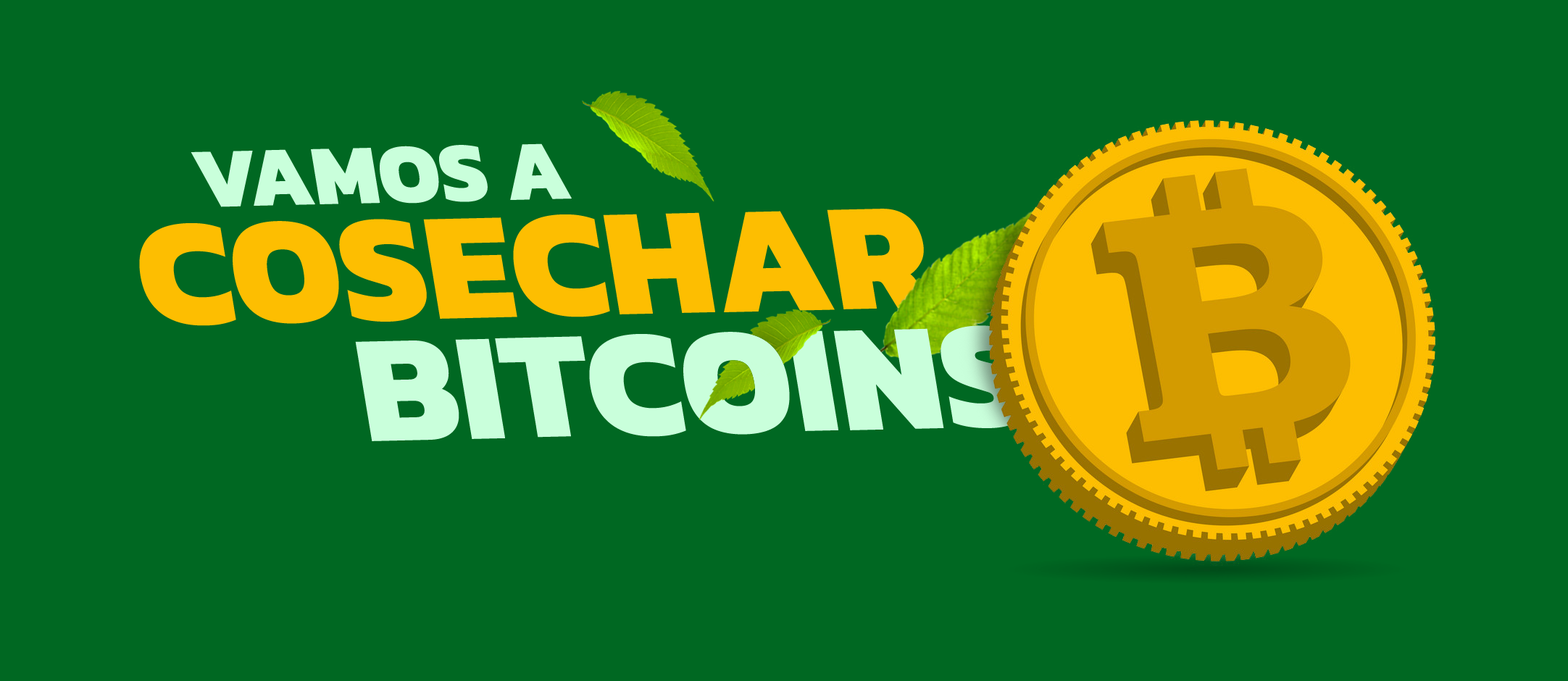
<style>
.page{position:relative;width:1568px;height:681px;background:#006822}
.page>*{position:absolute;margin:0}
.t1{font:86.5px "Kanit-ExtraBold";color:#c9ffdb}
.t2{font:156px "Kanit-ExtraBold";color:#fdbe01}
.t3{font:156px "Kanit-ExtraBold";color:#c9ffdb}
</style>
<div class="page">
<p class="t1" style="left:191px;top:143px;width:381px;height:64px;rotate:-1deg">VAMOS A</p>
<p class="t2" style="left:139px;top:209px;width:794px;height:117px;rotate:-1deg">COSECHAR</p>
<p class="t3" style="left:355px;top:325px;width:673px;height:116px;rotate:-1deg">BITCOINS</p>
</div>
